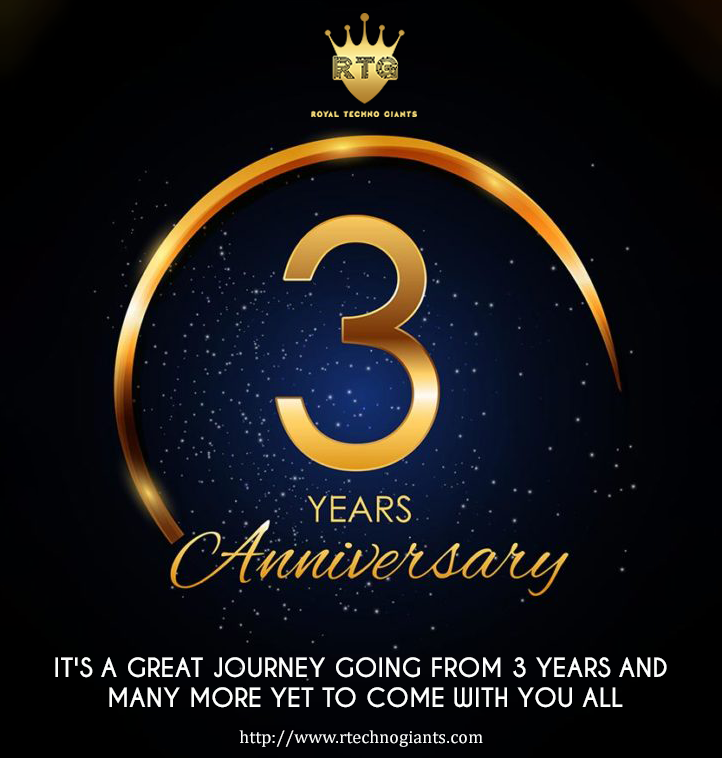
<style>
.page{position:relative;width:722px;height:758px}
.page>*{position:absolute;margin:0}
.t1{font:25px "CaviarDreams-Bold";color:#fdfefd}
.t2{font:18px "CambriaMath";color:#fdfefd}
</style>
<div class="page">
<p class="t1" style="left:55px;top:657px;width:612px;height:51px;text-align:center">IT'S A GREAT JOURNEY GOING FROM 3 YEARS AND <br>MANY MORE YET TO COME WITH YOU ALL</p>
<p class="t2" style="left:239px;top:730px;width:244px;height:17px">http://www.rtechnogiants.com</p>
</div>
